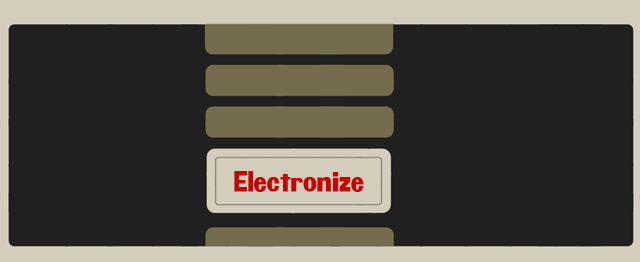
<style>
.page{position:relative;width:640px;height:262px;background:#202020}
.page>*{position:absolute;margin:0}
.t1{font:25.3px "Pretendo";color:#c10704;font-weight:bold;scale:0.76 1}
</style>
<div class="page">
<p class="t1" style="left:234px;top:171px;width:130px;height:21px">Electronize</p>
</div>
